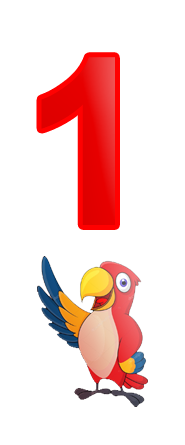
<style>
.page{position:relative;width:185px;height:445px;background:#ffffff}
.page>*{position:absolute;margin:0}
.t1{font:233px "Arial-BoldMT";color:#e70000}
</style>
<div class="page">
<p class="t1" style="left:41px;top:57px;width:74px;height:168px">1</p>
</div>
